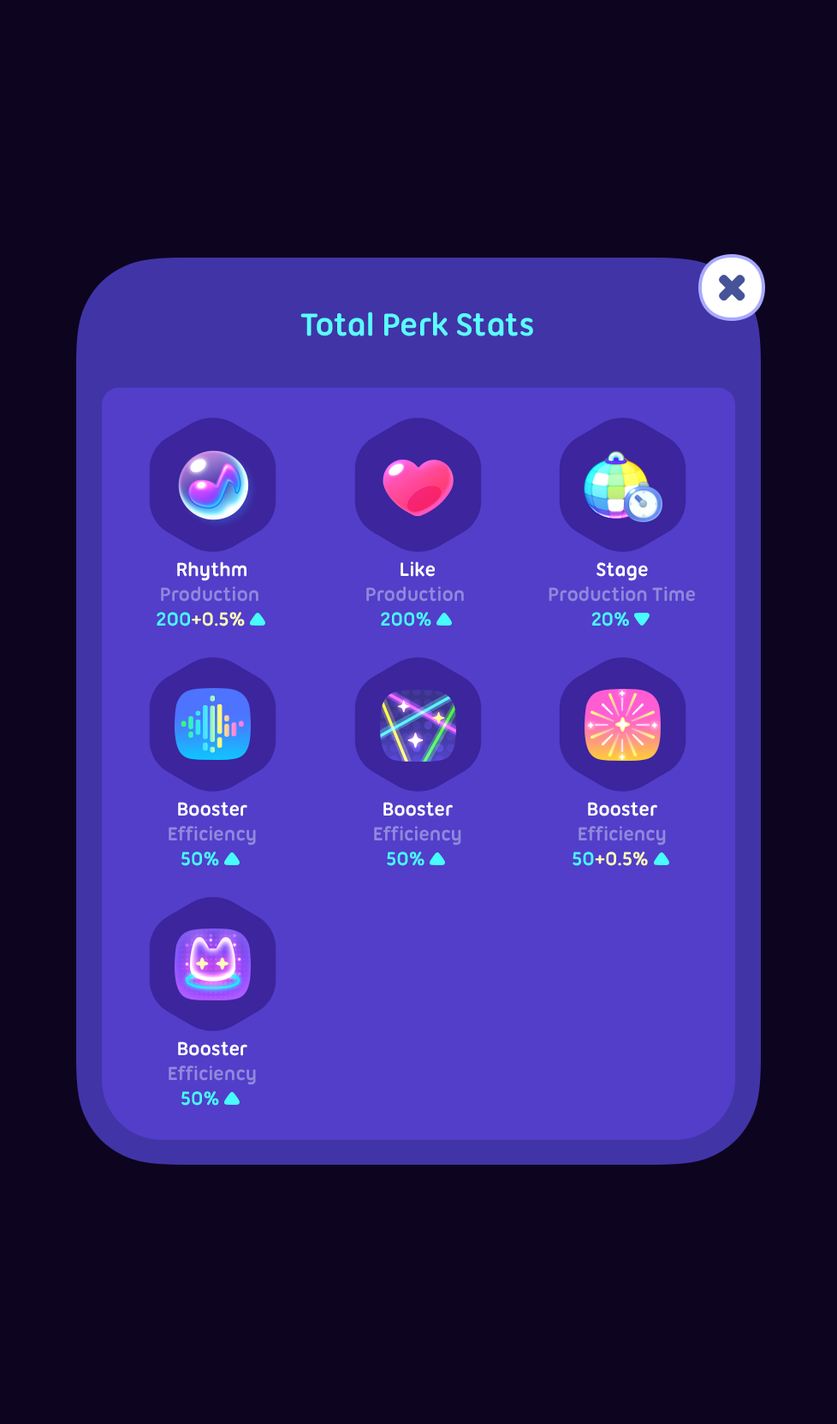
<style>
.page{position:relative;width:837px;height:1424px;background:#0d0420}
.page>*{position:absolute;margin:0}
.t1{font:34.2px "UbuntuTitling-Bold";letter-spacing:-0.025em;color:#5afdff}
.t2{font:20.5px "UbuntuTitling-Bold";letter-spacing:-0.025em;color:#9187dd}
.t3{font:20.5px "UbuntuTitling-Bold";letter-spacing:-0.025em;color:#ffffff}
.t4{font:20.5px "UbuntuTitling-Bold";letter-spacing:-0.025em;color:#48fbfd}
.t5{font:20.5px "UbuntuTitling-Bold";letter-spacing:-0.025em;color:#fefbb7}
</style>
<div class="page">
<p class="t1" style="left:300px;top:312px;width:233px;height:24px">Total Perk Stats</p>
<p class="t2" style="left:157px;top:562px;width:102px;height:65px;text-align:center"><span class="t3">Rhythm<br></span>Production <br><span class="t4">200</span><span class="t5">+0.5%</span></p>
<p class="t2" style="left:366px;top:562px;width:98px;height:65px;text-align:center"><span class="t3">Like<br></span>Production <br><span class="t4">200%</span></p>
<p class="t2" style="left:549px;top:562px;width:146px;height:65px;text-align:center"><span class="t3">Stage<br></span>Production Time<br><span class="t4">20%</span></p>
<p class="t2" style="left:169px;top:802px;width:87px;height:64px;text-align:center"><span class="t3">Booster<br></span>Efficiency<br><span class="t4">50%</span></p>
<p class="t2" style="left:374px;top:802px;width:87px;height:64px;text-align:center"><span class="t3">Booster<br></span>Efficiency<br><span class="t4">50%</span></p>
<p class="t2" style="left:573px;top:802px;width:93px;height:64px;text-align:center"><span class="t3">Booster<br></span>Efficiency<br><span class="t4">50</span><span class="t5">+0.5%</span></p>
<p class="t2" style="left:169px;top:1042px;width:87px;height:64px;text-align:center"><span class="t3">Booster<br></span>Efficiency<br><span class="t4">50%</span></p>
</div>
